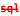
<style>
.page{position:relative;width:20px;height:16px;background:#ffffff}
.page>*{position:absolute;margin:0}
.t1{font:11px "DejaVuSansMono";color:#ff0000}
.t2{font:24px "DejaVuSansMono";color:#ff0000;scale:1.2 1}
</style>
<div class="page">
<p class="t1" style="left:1px;top:3px;width:18px;height:12px">sql</p>
<p class="t2" style="left:1px;top:8px;width:18px;height:2px">_</p>
</div>
